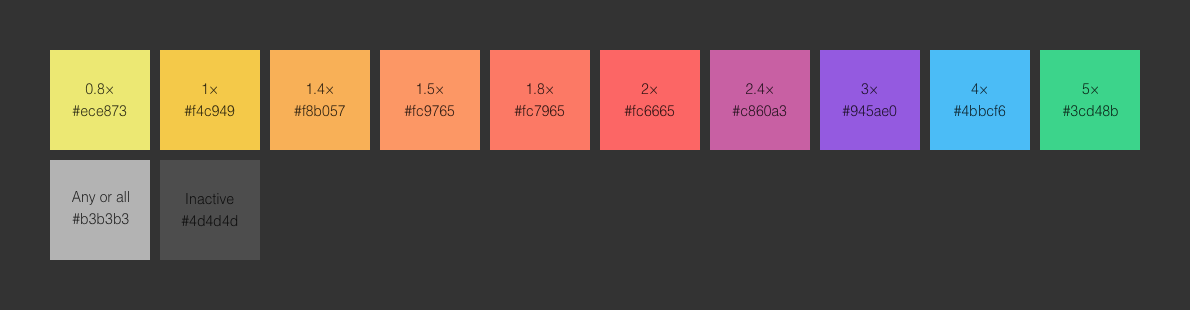
<style>
.page{position:relative;width:1190px;height:310px;background:#333333}
.page>*{position:absolute;margin:0}
.t1{font:14px/22px "Helvetica-Light";color:#2f2e17}
.t2{font:14px/22px "Helvetica-Light";color:#31280f}
.t3{font:14px/22px "Helvetica-Light";color:#322311}
.t4{font:14px/22px "Helvetica-Light";color:#321e14}
.t5{font:14px/22px "Helvetica-Light";color:#321814}
.t6{font:14px/22px "Helvetica-Light";color:#321414}
.t7{font:14px/22px "Helvetica-Light";color:#281321}
.t8{font:14px/22px "Helvetica-Light";color:#1e122d}
.t9{font:14px/22px "Helvetica-Light";color:#0f2631}
.t10{font:14px/22px "Helvetica-Light";color:#0c2a1c}
.t11{font:14px/22px "Helvetica-Light";color:#242424}
.t12{font:14px/22px "Helvetica-Light";color:#000000}
</style>
<div class="page">
<p class="t1" style="left:72px;top:83px;width:55px;height:34px;text-align:center">0.8×<br>#ece873</p>
<p class="t2" style="left:184px;top:83px;width:51px;height:34px;text-align:center">1×<br>#f4c949</p>
<p class="t3" style="left:294px;top:83px;width:51px;height:34px;text-align:center">1.4×<br>#f8b057</p>
<p class="t4" style="left:404px;top:83px;width:51px;height:34px;text-align:center">1.5×<br>#fc9765</p>
<p class="t5" style="left:514px;top:83px;width:51px;height:34px;text-align:center">1.8×<br>#fc7965</p>
<p class="t6" style="left:624px;top:83px;width:51px;height:34px;text-align:center">2×<br>#fc6665</p>
<p class="t7" style="left:732px;top:83px;width:55px;height:34px;text-align:center">2.4×<br>#c860a3</p>
<p class="t8" style="left:842px;top:83px;width:55px;height:34px;text-align:center">3×<br>#945ae0</p>
<p class="t9" style="left:954px;top:83px;width:52px;height:34px;text-align:center">4×<br>#4bbcf6</p>
<p class="t10" style="left:1063px;top:83px;width:55px;height:34px;text-align:center">5×<br>#3cd48b</p>
<p class="t11" style="left:72px;top:191px;width:57px;height:34px;text-align:center">Any or all<br>#b3b3b3</p>
<p class="t12" style="left:181px;top:193px;width:57px;height:34px;text-align:center">Inactive<br>#4d4d4d</p>
</div>
